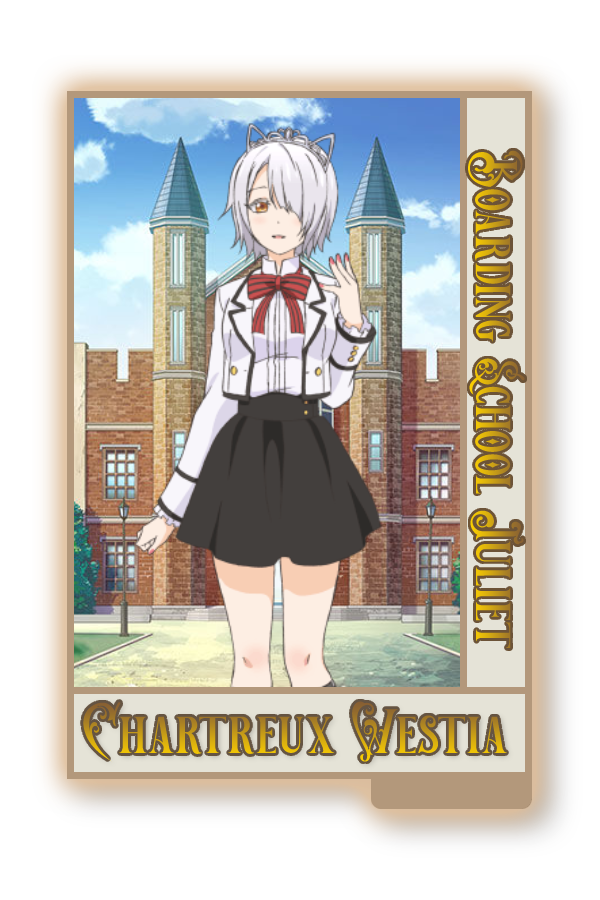
<style>
.page{position:relative;width:600px;height:900px;background:#ffffff}
.page>*{position:absolute;margin:0}
.t1{font:58.9px "VictorianDecadeDemoVersion"}
.t2{font:62.3px "VictorianDecadeDemoVersion"}
</style>
<div class="page">
<p class="t1" style="left:468px;top:150px;width:57px;height:498px;rotate:90deg">Boarding School Juliet</p>
<p class="t2" style="left:83px;top:701px;width:424px;height:61px">Chartreux Westia</p>
</div>
